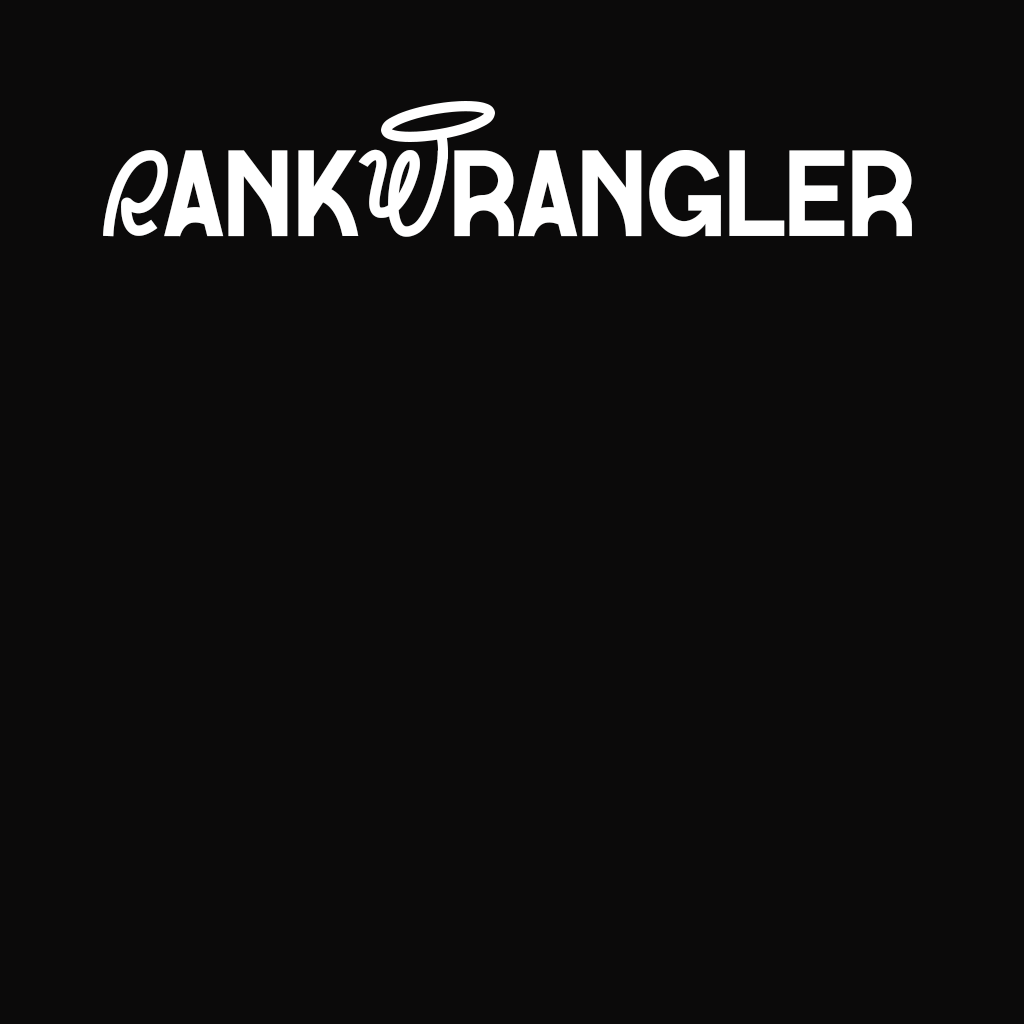
<style>
.page{position:relative;width:1024px;height:1024px;background:#0b0a0a}
.page>*{position:absolute;margin:0}
.t1{font:122.7px "MorcenaRegular";color:#ffffff}
</style>
<div class="page">
<p class="t1" style="left:103px;top:149px;width:809px;height:88px">RankWrangler</p>
</div>
